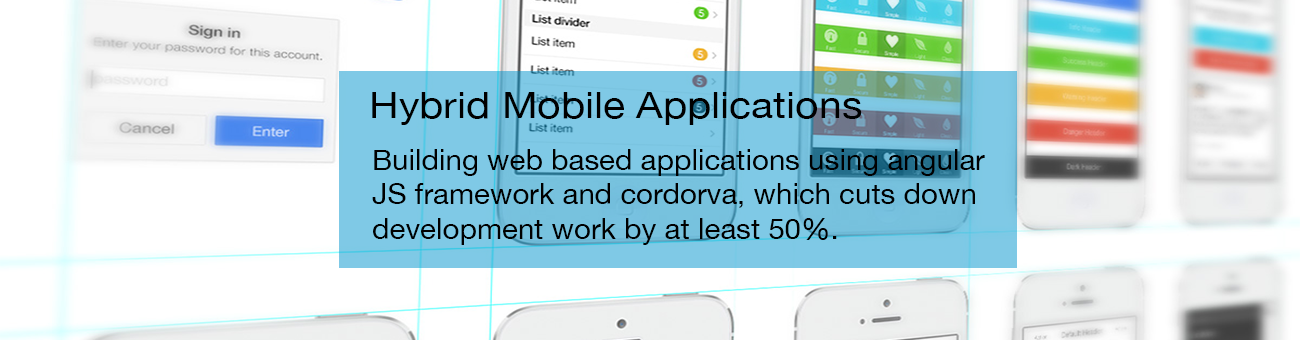
<style>
.page{position:relative;width:1300px;height:340px;background:#ffffff}
.page>*{position:absolute;margin:0}
.t1{font:36.6px "HelveticaNeue";color:#000000;scale:1.12 1}
.t2{font:28.9px "HelveticaNeue";color:#000000}
</style>
<div class="page">
<p class="t1" style="left:372px;top:92px;width:490px;height:33px">Hybrid Mobile Applications</p>
<p class="t2" style="left:372px;top:149px;width:613px;height:96px">Building web based applications using angular<br>JS framework and cordorva, which cuts down <br>development work by at least 50%.</p>
</div>
